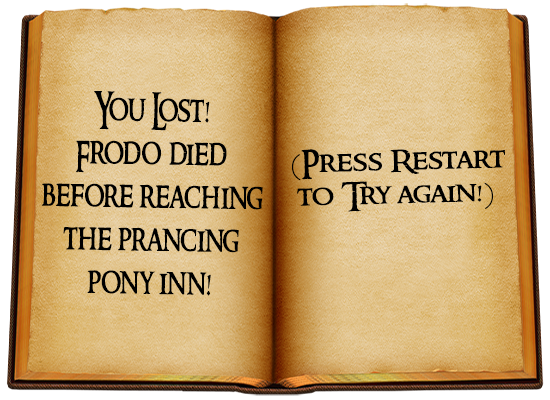
<style>
.page{position:relative;width:550px;height:400px}
.page>*{position:absolute;margin:0}
.t1{font:36px "RingbearerMedium";color:#000000;scale:0.78 1}
.t2{font:27.7px "RingbearerMedium";color:#000000;scale:1.12 1}
</style>
<div class="page">
<p class="t1" style="left:41px;top:91px;width:222px;height:205px;text-align:center;rotate:1deg">You Lost!<br>Frodo died<br>before reaching<br>the prancing<br>pony inn!</p>
<p class="t2" style="left:292px;top:149px;width:213px;height:63px;text-align:center;rotate:-1deg">(Press Restart<br>to Try again!)</p>
</div>
